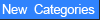
<style>
.page{position:relative;width:100px;height:20px;background:#3083fd}
.page>*{position:absolute;margin:0}
.t1{font:12.5px "ArialMT";color:#ffffff}
</style>
<div class="page">
<p class="t1" style="left:2px;top:4px;width:93px;height:13px">New  Categories</p>
</div>
